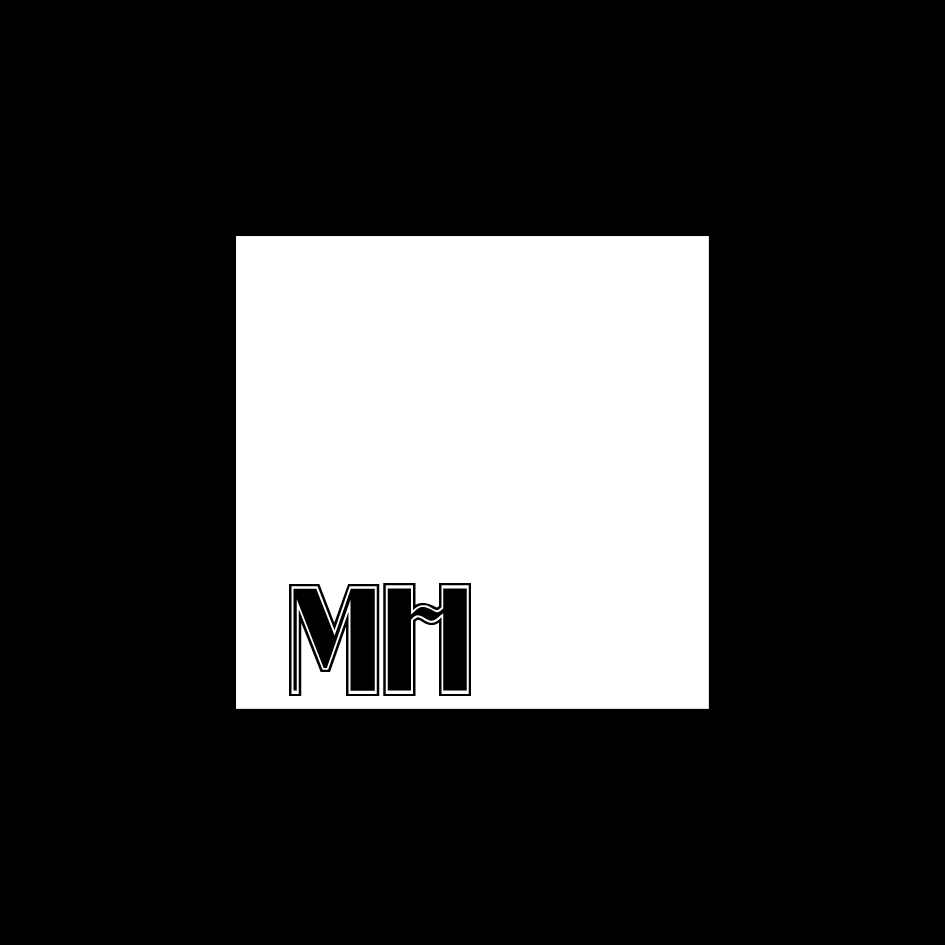
<style>
.page{position:relative;width:945px;height:945px;background:#000000}
.page>*{position:absolute;margin:0}
.t1{font:150px "OldgateLaneOutline";color:#000000}
</style>
<div class="page">
<p class="t1" style="left:289px;top:583px;width:182px;height:113px">MH</p>
</div>
